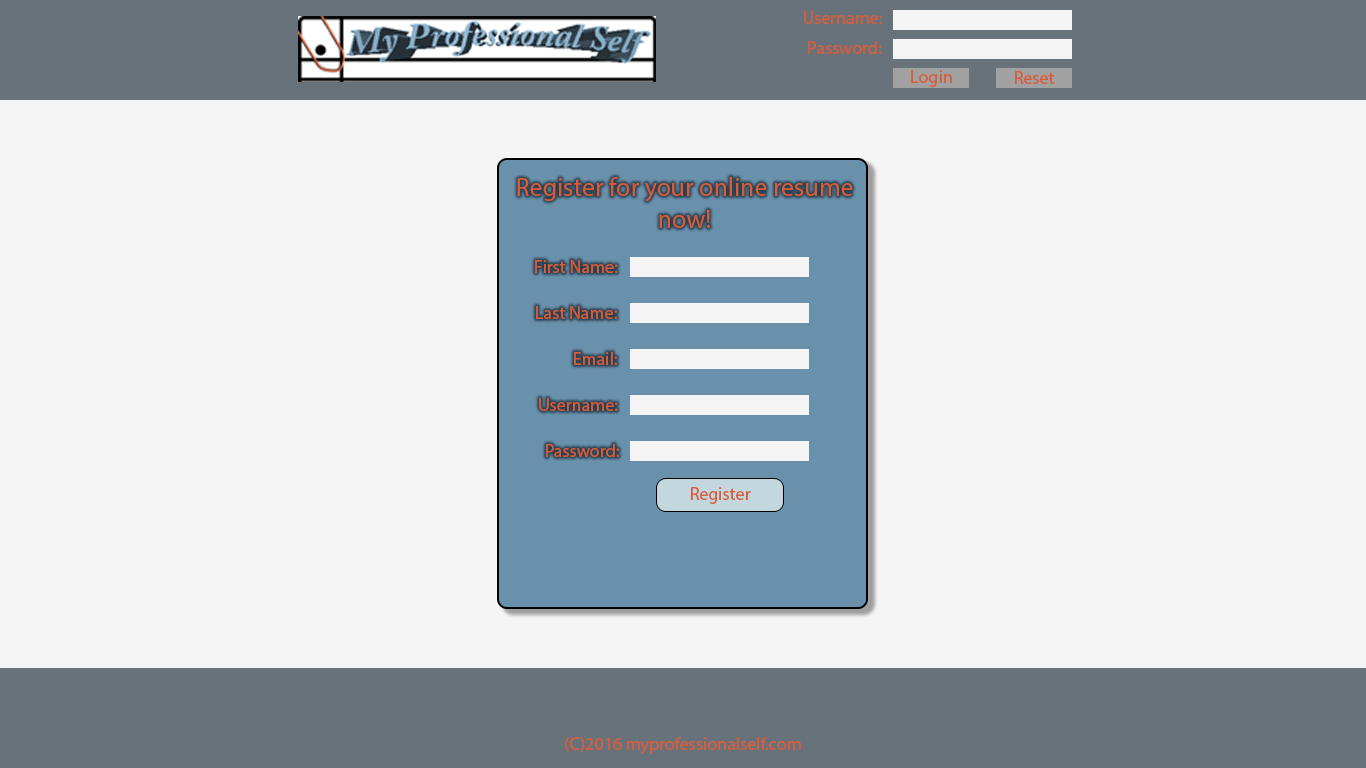
<style>
.page{position:relative;width:1366px;height:768px;background:#f5f5f5}
.page>*{position:absolute;margin:0}
.t1{font:18px "MyriadPro-Regular";color:#d75c37}
.t2{font:26px "MyriadPro-Regular";color:#d75c37}
</style>
<div class="page">
<p class="t1" style="left:804px;top:11px;width:78px;height:13px">Username:</p>
<p class="t1" style="left:808px;top:41px;width:74px;height:13px">Password:</p>
<p class="t1" style="left:911px;top:70px;width:41px;height:17px">Login</p>
<p class="t1" style="left:1015px;top:71px;width:40px;height:13px">Reset</p>
<p class="t2" style="left:517px;top:177px;width:336px;height:51px;text-align:center">Register for your online resume now!</p>
<p class="t1" style="left:535px;top:260px;width:83px;height:13px">First Name:</p>
<p class="t1" style="left:536px;top:306px;width:81px;height:13px">Last Name:</p>
<p class="t1" style="left:574px;top:352px;width:43px;height:13px">Email:</p>
<p class="t1" style="left:539px;top:398px;width:79px;height:13px">Username:</p>
<p class="t1" style="left:546px;top:444px;width:73px;height:13px">Password:</p>
<p class="t1" style="left:691px;top:487px;width:60px;height:17px">Register</p>
<p class="t1" style="left:565px;top:737px;width:236px;height:17px">(C)2016 myprofessionalself.com</p>
</div>
